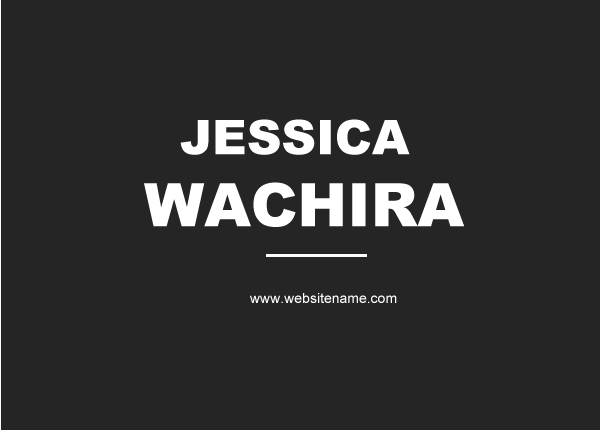
<style>
.page{position:relative;width:600px;height:430px;background:#252525}
.page>*{position:absolute;margin:0}
.t1{font:48px "Arial-Black";color:#ffffff}
.t2{font:24px "BodoniMT-Bold";color:#ffffff}
.t3{font:60px "Arial-Black";color:#ffffff}
.t4{font:14px "ArialMT";color:#ffffff}
</style>
<div class="page">
<p class="t1" style="left:144px;top:119px;width:321px;height:108px"><span class="t2">       <br><br><br>     </span>JESSICA<br><span class="t3">    WACHIRA</span></p>
<p class="t4" style="left:250px;top:293px;width:147px;height:10px">www.websitename.com</p>
</div>
